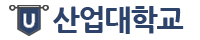
<style>
.page{position:relative;width:200px;height:40px;background:#ffffff}
.page>*{position:absolute;margin:0}
.t1{font:29.2px "NanumGothicExtraBold";letter-spacing:-0.05em;color:#2e4369}
</style>
<div class="page">
<p class="t1" style="left:53px;top:6px;width:131px;height:28px">산업대학교</p>
</div>
